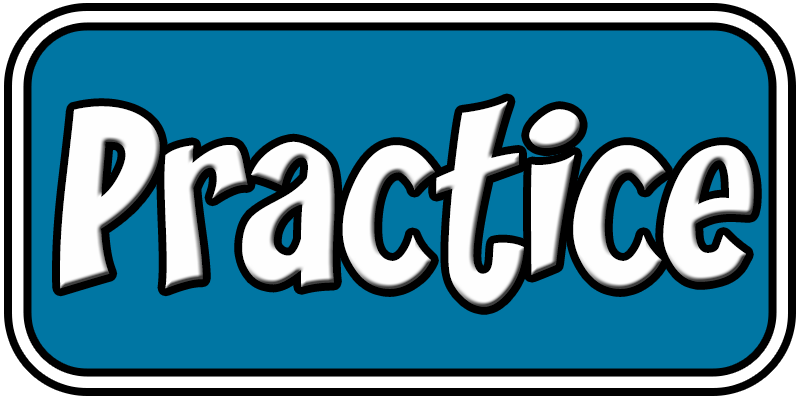
<style>
.page{position:relative;width:800px;height:400px;background:#0076a3}
.page>*{position:absolute;margin:0}
.t1{font:224px "Yikes";color:#fefefe}
</style>
<div class="page">
<p class="t1" style="left:60px;top:101px;width:694px;height:206px">Practice</p>
</div>
